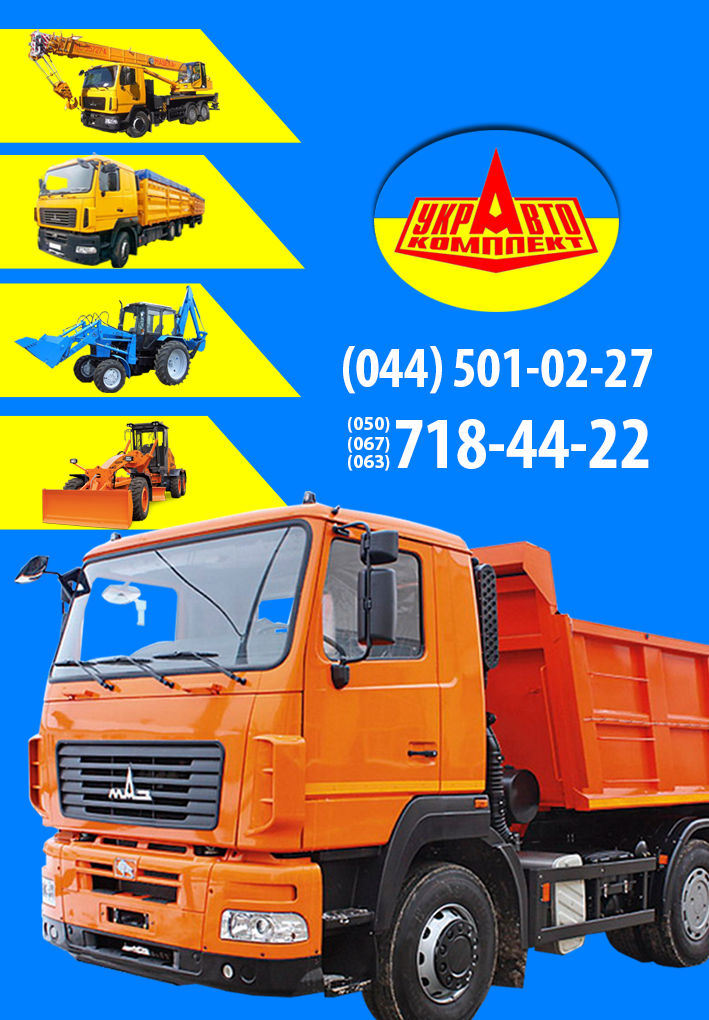
<style>
.page{position:relative;width:709px;height:1020px;background:#0080ff}
.page>*{position:absolute;margin:0}
.t1{font:58.1px "MyriadPro-BoldCond";letter-spacing:-0.01em;color:#fefefe}
.t2{font:19.1px "MyriadPro-Bold";color:#fdfcfc}
.t3{font:19.1px "MyriadPro-Bold";color:#ffffff}
.t4{font:74px "MyriadPro-BoldCond";letter-spacing:-0.01em;color:#ffffff}
</style>
<div class="page">
<p class="t1" style="left:343px;top:345px;width:309px;height:49px">(044) 501-02-27</p>
<p class="t2" style="left:348px;top:417px;width:42px;height:16px">(050<span class="t3">)</span></p>
<p class="t4" style="left:396px;top:419px;width:253px;height:50px">718-44-22</p>
<p class="t3" style="left:348px;top:437px;width:42px;height:16px">(067)</p>
<p class="t3" style="left:348px;top:455px;width:42px;height:16px">(063)</p>
</div>
